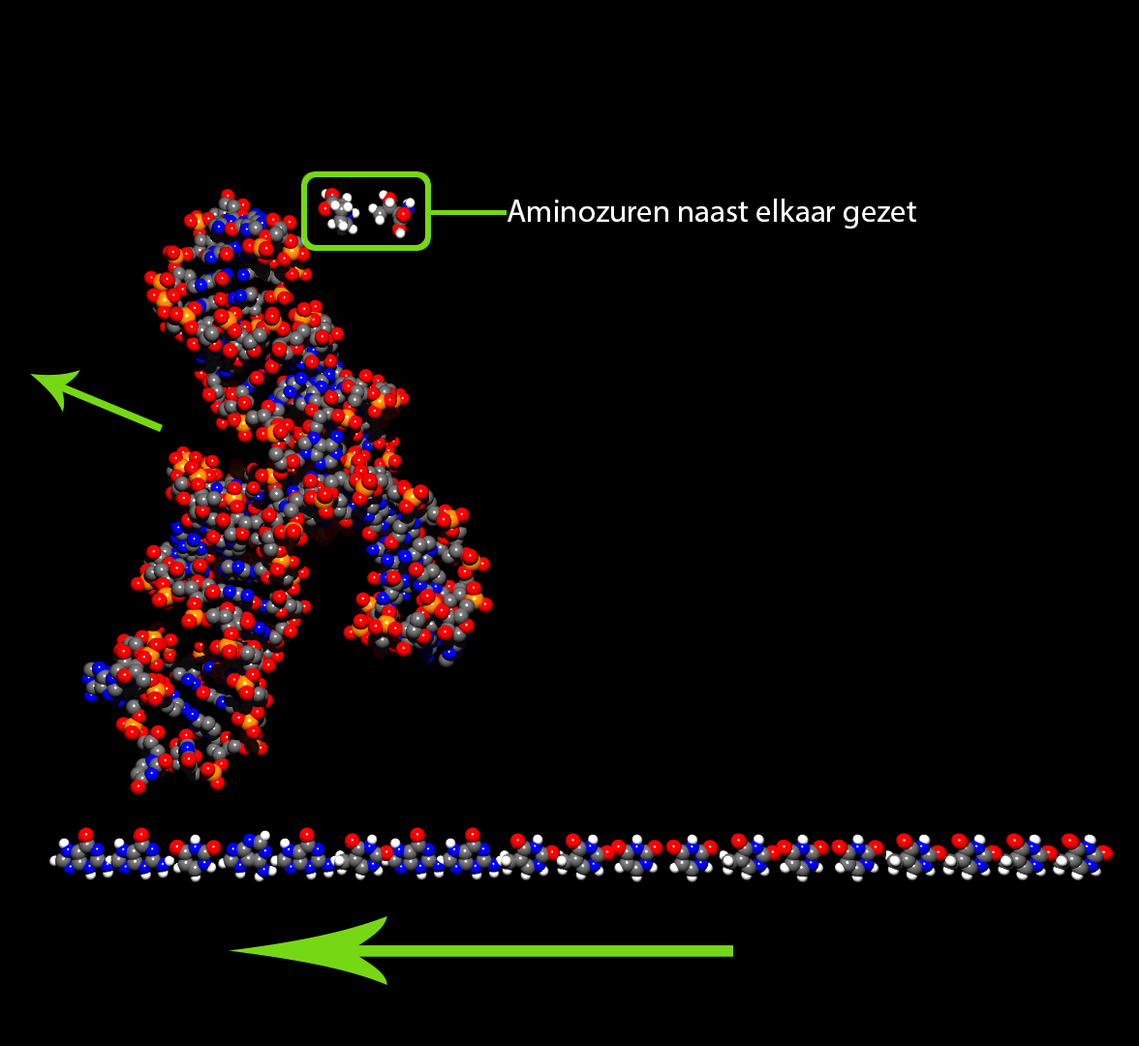
<style>
.page{position:relative;width:1139px;height:1046px;background:#000000}
.page>*{position:absolute;margin:0}
.t1{font:32px "MyriadPro-Regular";color:#ffffff}
</style>
<div class="page">
<p class="t1" style="left:508px;top:199px;width:409px;height:30px">Aminozuren naast elkaar gezet</p>
</div>
